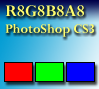
<style>
.page{position:relative;width:99px;height:89px}
.page>*{position:absolute;margin:0}
.t1{font:14px "Perpetua-Bold";color:#fefc6e}
.t2{font:18px "Perpetua-Bold";color:#fefc6e}
</style>
<div class="page">
<p class="t1" style="left:5px;top:5px;width:89px;height:32px"><span class="t2">R8G8B8A8<br></span>PhotoShop CS3</p>
</div>
